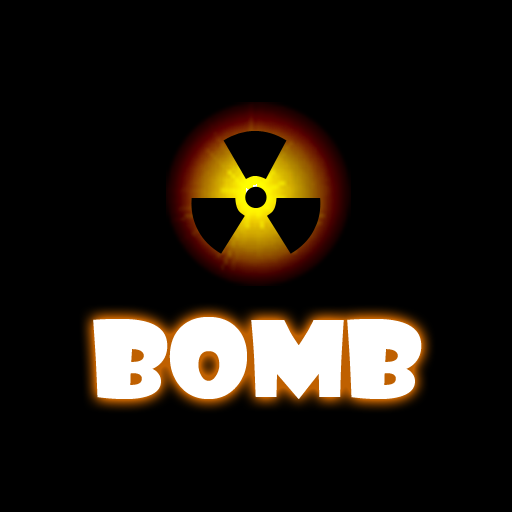
<style>
.page{position:relative;width:512px;height:512px;background:#000000}
.page>*{position:absolute;margin:0}
.t1{font:102px "ShowcardGothic-Reg";color:#ffffff;scale:1.14 1}
</style>
<div class="page">
<p class="t1" style="left:93px;top:317px;width:329px;height:82px">BOMB</p>
</div>
